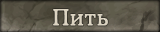
<style>
.page{position:relative;width:160px;height:32px}
.page>*{position:absolute;margin:0}
.t1{font:22px "CooperLightCBT";letter-spacing:0.03em;color:#dbd3c1;font-weight:bold}
</style>
<div class="page">
<p class="t1" style="left:53px;top:9px;width:55px;height:17px">Пить</p>
</div>
